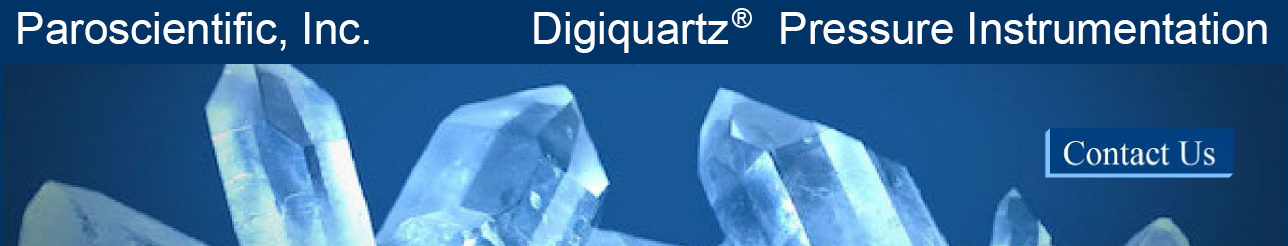
<style>
.page{position:relative;width:1288px;height:246px;background:#003366}
.page>*{position:absolute;margin:0}
.t1{font:44px "ArialMT";color:#ffffff}
.t2{font:26.7px "ArialMT";color:#ffffff}
</style>
<div class="page">
<p class="t1" style="left:18px;top:12px;width:1249px;height:41px">Paroscientific, Inc.             Digiquartz    Pressure Instrumentation</p>
<p class="t2" style="left:731px;top:8px;width:21px;height:20px">®</p>
</div>
